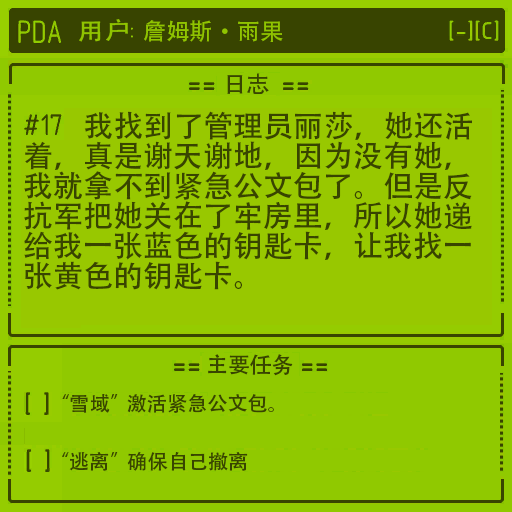
<style>
.page{position:relative;width:512px;height:512px;background:#90c900}
.page>*{position:absolute;margin:0}
.t1{font:30px/30px "AdobeHeitiStd-Regular";color:#384400}
</style>
<div class="page">
<p class="t1" style="left:24px;top:111px;width:448px;height:179px">我找到了管理员丽莎，她还活<br>着，真是谢天谢地，因为没有她，<br>我就拿不到紧急公文包了。但是反<br>抗军把她关在了牢房里，所以她递<br>给我一张蓝色的钥匙卡，让我找一<br>张黄色的钥匙卡。</p>
</div>
